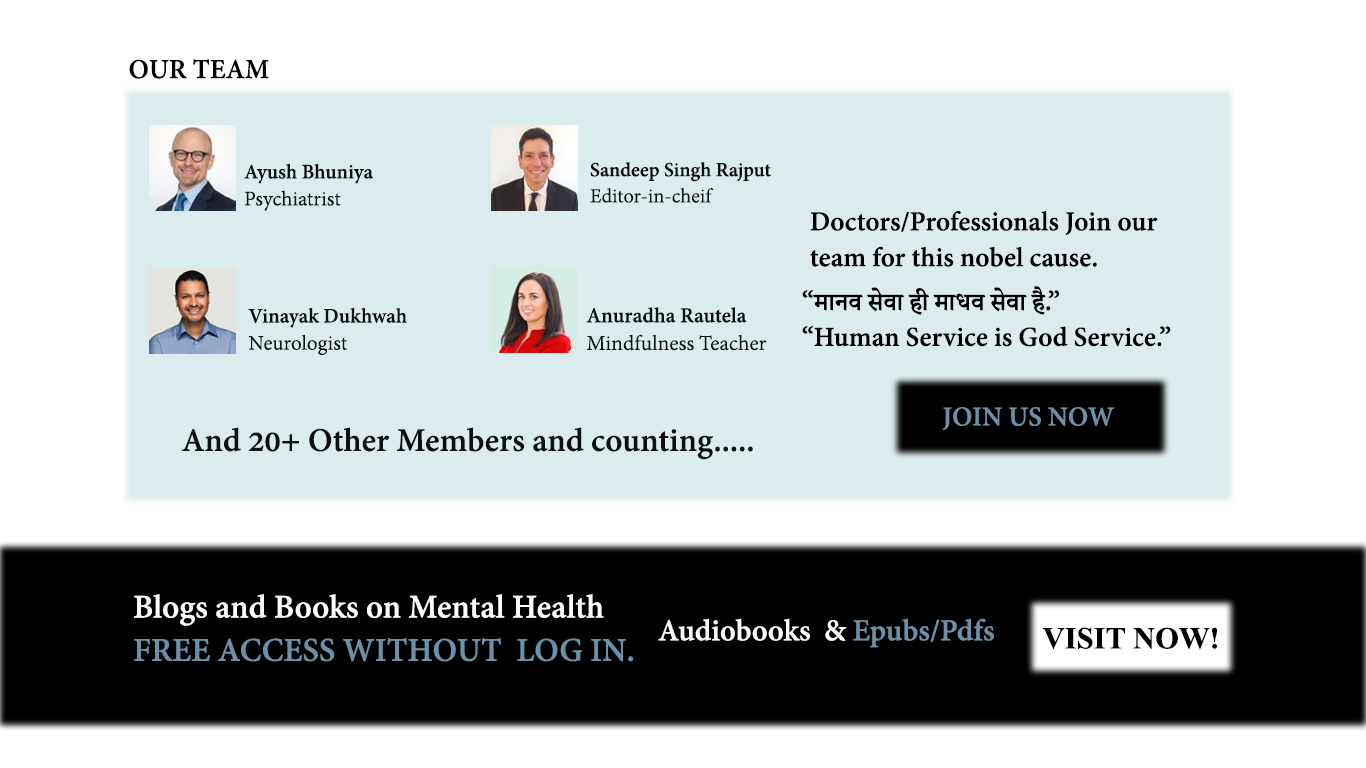
<style>
.page{position:relative;width:1366px;height:768px;background:#dcebed}
.page>*{position:absolute;margin:0}
.t1{font:30px "AdobeDevanagari-Bold";color:#000000}
.t2{font:22.4px "AdobeDevanagari-Bold";color:#0e1010}
.t3{font:22.4px "AdobeDevanagari-Regular";color:#0e1010}
.t4{font:21.8px "AdobeDevanagari-Bold";color:#0e1010}
.t5{font:21.8px "AdobeDevanagari-Regular";color:#0e1010}
.t6{font:29.9px "AdobeDevanagari-Bold";color:#000000}
.t7{font:22.6px "AdobeDevanagari-Bold";color:#0e1010}
.t8{font:22.6px "AdobeDevanagari-Regular";color:#0e1010}
.t9{font:23.1px "AdobeDevanagari-Regular";color:#0e1010}
.t10{font:23.1px "AdobeDevanagari-Bold";color:#0e1010}
.t11{font:29.9px "AdobeDevanagari-Bold";color:#6b90a7}
.t12{font:36.1px "AdobeDevanagari-Bold";color:#0e1010}
.t13{font:36px "AdobeDevanagari-Bold";color:#fcfcfc}
.t14{font:36px "AdobeDevanagari-Bold";color:#6b90a7}
.t15{font:33.2px "AdobeDevanagari-Bold";color:#fcfcfc}
.t16{font:33.2px "AdobeDevanagari-Bold";color:#6b90a7}
.t17{font:30.6px "TimesNewRomanPS-BoldMT";color:#000000}
</style>
<div class="page">
<p class="t1" style="left:129px;top:59px;width:140px;height:20px">OUR TEAM</p>
<p class="t2" style="left:244px;top:163px;width:129px;height:48px">Ayush Bhuniya<br><span class="t3">Psychiatrist</span></p>
<p class="t4" style="left:590px;top:162px;width:181px;height:41px">Sandeep Singh Rajput<br><span class="t5">Editor-in-cheif</span></p>
<p class="t6" style="left:810px;top:210px;width:348px;height:57px">Doctors/Professionals Join our team for this nobel cause.</p>
<p class="t6" style="left:802px;top:286px;width:369px;height:61px">“मानव सेवा ही माधव सेवा है.”<br>“Human Service is God Service.”</p>
<p class="t7" style="left:248px;top:307px;width:159px;height:48px">Vinayak Dukhwah<br><span class="t8">Neurologist</span></p>
<p class="t9" style="left:586px;top:307px;width:181px;height:44px"><span class="t10">Anuradha Rautela <br></span>Mindfulness Teacher</p>
<p class="t11" style="left:942px;top:407px;width:173px;height:24px">JOIN US NOW</p>
<p class="t12" style="left:182px;top:427px;width:571px;height:33px">And 20+ Other Members and counting.....</p>
<p class="t13" style="left:134px;top:594px;width:499px;height:68px">Blogs and Books on Mental Health  <br><span class="t14">FREE ACCESS WITHOUT  LOG IN.</span></p>
<p class="t15" style="left:658px;top:618px;width:336px;height:30px">Audiobooks  &amp; <span class="t16">Epubs/Pdfs</span></p>
<p class="t17" style="left:1042px;top:627px;width:176px;height:22px">VISIT NOW!</p>
</div>
